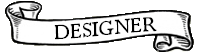
<style>
.page{position:relative;width:204px;height:52px;background:#ffffff}
.page>*{position:absolute;margin:0}
.t1{font:24px "Perpetua";color:#000000}
</style>
<div class="page">
<p class="t1" style="left:54px;top:17px;width:103px;height:23px;rotate:-2deg">DESIGNER</p>
</div>
